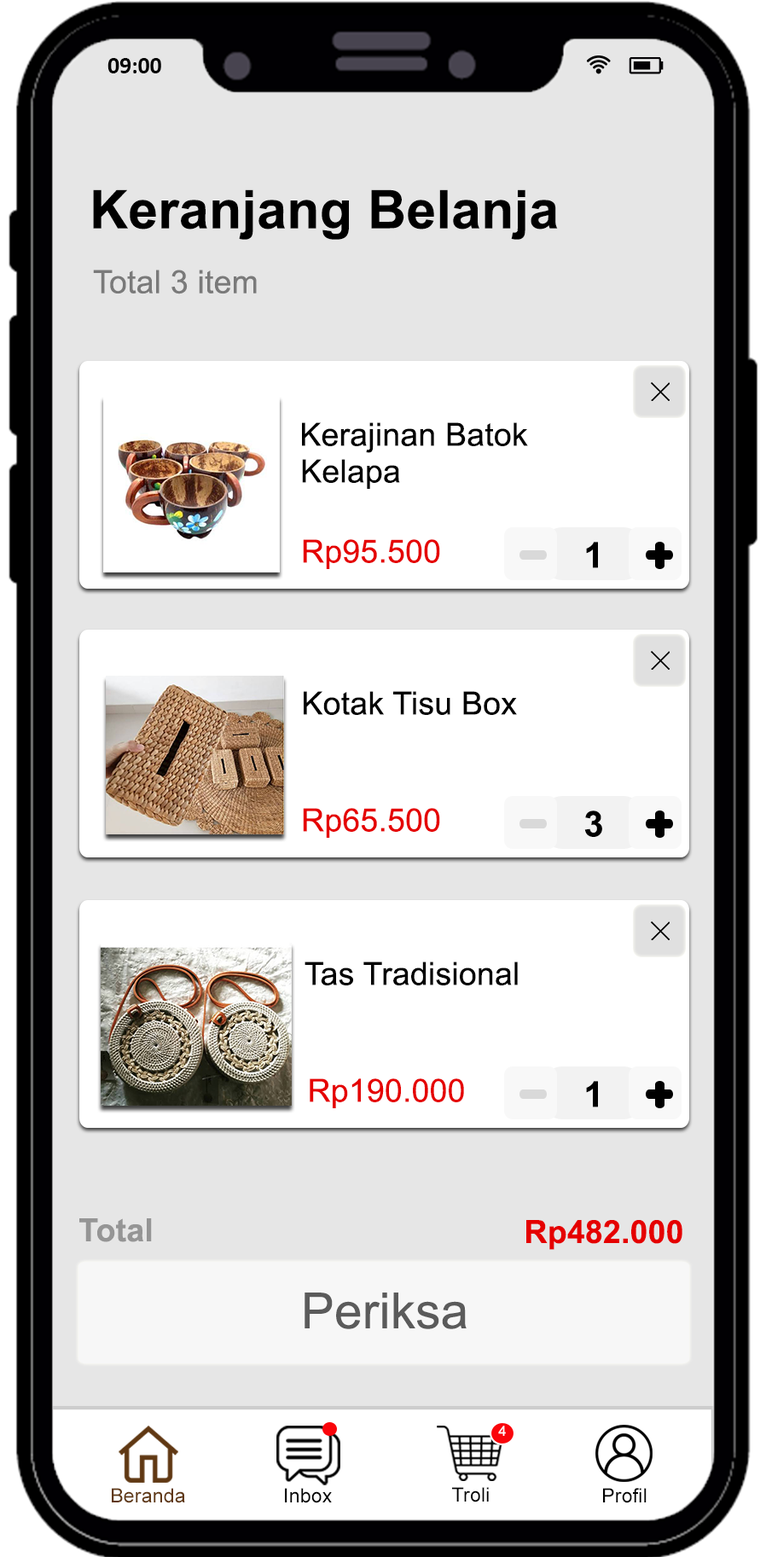
<style>
.page{position:relative;width:766px;height:1557px;background:#ffffff}
.page>*{position:absolute;margin:0}
.t1{font:23.6px "Calibri-Bold";color:#000000}
.t2{font:53.3px "Arial-BoldMT";letter-spacing:0.005em;color:#000000}
.t3{font:32px "ArialMT";letter-spacing:0.005em;color:#7a7a7a}
.t4{font:32px "ArialMT";letter-spacing:0.005em;color:#000000}
.t5{font:32px "ArialMT";letter-spacing:0.005em;color:#e50000}
.t6{font:35.5px "Arial-BoldMT";letter-spacing:0.005em;color:#000000}
.t7{font:32px "Arial-BoldMT";letter-spacing:0.005em;color:#959595}
.t8{font:32px "Arial-BoldMT";letter-spacing:0.005em;color:#e50000}
.t9{font:49.8px "ArialMT";letter-spacing:0.005em;color:#5b5b5b}
.t10{font:14.2px "ArialMT";letter-spacing:0.01em;color:#ffffff}
.t11{font:19.6px "ArialMT";letter-spacing:0.01em;color:#603813}
.t12{font:19.6px "ArialMT";letter-spacing:0.01em;color:#000000}
</style>
<div class="page">
<p class="t1" style="left:107px;top:58px;width:54px;height:15px">09:00</p>
<p class="t2" style="left:93px;top:189px;width:465px;height:51px">Keranjang Belanja</p>
<p class="t3" style="left:93px;top:270px;width:164px;height:24px">Total 3 item</p>
<p class="t4" style="left:302px;top:422px;width:226px;height:31px">Kerajinan Batok</p>
<p class="t4" style="left:302px;top:459px;width:98px;height:30px">Kelapa</p>
<p class="t5" style="left:303px;top:539px;width:137px;height:30px">Rp95.500</p>
<p class="t6" style="left:586px;top:542px;width:12px;height:26px">1</p>
<p class="t4" style="left:304px;top:691px;width:213px;height:24px">Kotak Tisu Box</p>
<p class="t5" style="left:303px;top:808px;width:137px;height:30px">Rp65.500</p>
<p class="t6" style="left:584px;top:810px;width:18px;height:27px">3</p>
<p class="t4" style="left:305px;top:961px;width:213px;height:24px">Tas Tradisional</p>
<p class="t5" style="left:310px;top:1078px;width:154px;height:30px">Rp190.000</p>
<p class="t6" style="left:586px;top:1081px;width:12px;height:26px">1</p>
<p class="t7" style="left:79px;top:1218px;width:73px;height:24px">Total</p>
<p class="t8" style="left:526px;top:1220px;width:156px;height:30px">Rp482.000</p>
<p class="t9" style="left:305px;top:1292px;width:162px;height:37px">Periksa</p>
<p class="t10" style="left:498px;top:1425px;width:8px;height:11px">4</p>
<p class="t11" style="left:112px;top:1488px;width:73px;height:15px">Beranda</p>
<p class="t12" style="left:285px;top:1488px;width:47px;height:15px">Inbox</p>
<p class="t12" style="left:452px;top:1487px;width:37px;height:15px">Troli</p>
<p class="t12" style="left:603px;top:1488px;width:44px;height:15px">Profil</p>
</div>
